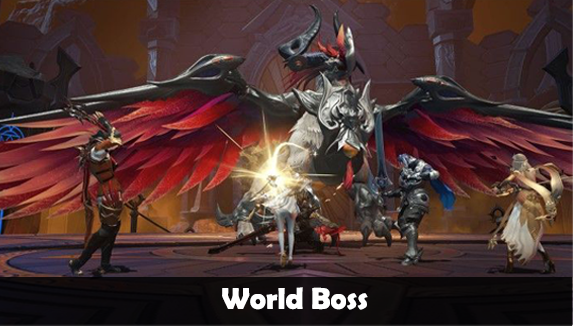
<style>
.page{position:relative;width:573px;height:326px}
.page>*{position:absolute;margin:0}
.t1{font:30.4px "BerlinSansFBDemi-Bold";color:#ffffff}
</style>
<div class="page">
<p class="t1" style="left:222px;top:287px;width:146px;height:23px">World Boss</p>
</div>
